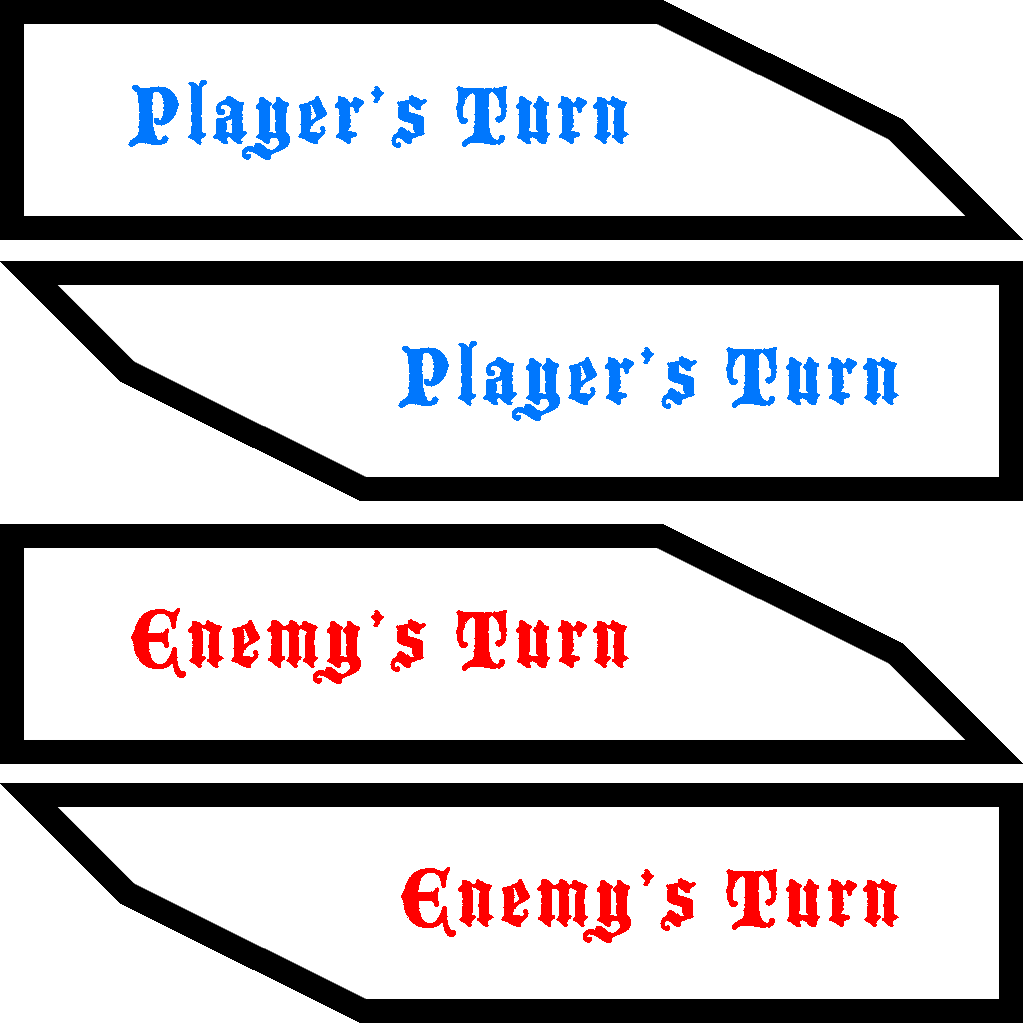
<style>
.page{position:relative;width:1024px;height:1024px;background:#ffffff}
.page>*{position:absolute;margin:0}
.t1{font:88.9px "BlackmoorLetPlain";letter-spacing:0.05em;color:#0077fd}
.t2{font:88.9px "BlackmoorLetPlain";letter-spacing:0.05em;color:#ff0000}
</style>
<div class="page">
<p class="t1" style="left:128px;top:80px;width:501px;height:80px">Player’s Turn</p>
<p class="t1" style="left:398px;top:341px;width:501px;height:80px">Player’s Turn</p>
<p class="t2" style="left:131px;top:608px;width:498px;height:76px">Enemy’s Turn</p>
<p class="t2" style="left:401px;top:867px;width:498px;height:76px">Enemy’s Turn</p>
</div>
